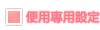
<style>
.page{position:relative;width:100px;height:30px;background:#ffffff}
.page>*{position:absolute;margin:0}
.t1{font:12px "AdobeFanHeitiStd-Bold";color:#f97887;font-weight:bold}
</style>
<div class="page">
<p class="t1" style="left:26px;top:11px;width:74px;height:12px">便用專用設定</p>
</div>
